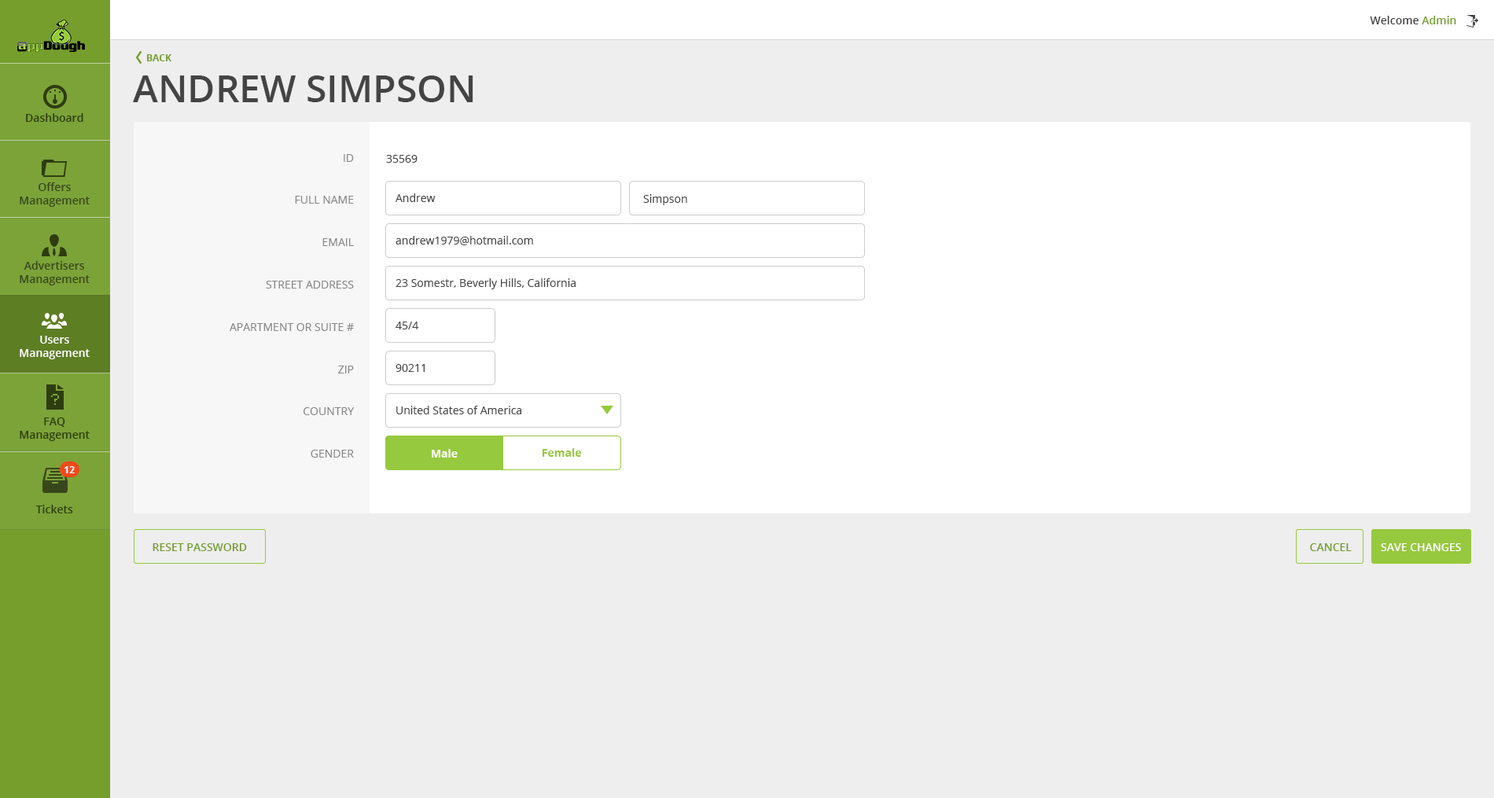
<style>
.page{position:relative;width:1494px;height:798px;background:#eeeeee}
.page>*{position:absolute;margin:0}
.t1{font:11px "OpenSans-Semibold";color:#444444}
.t2{font:11px "OpenSans-Semibold";color:#759e2d}
.t3{font:9.4px "OpenSans-Bold";color:#759e2d;text-transform:uppercase}
.t4{font:37.7px "OpenSans-Semibold";color:#444444;text-transform:uppercase}
.t5{font:11px "OpenSans-Semibold";color:#2d3d0f}
.t6{font:11px "OpenSans";color:#888888;text-transform:uppercase}
.t7{font:11px "OpenSans";color:#444444}
.t8{font:11px "OpenSans-Semibold";color:#fffffe}
.t9{font:11px "OpenSans-Bold";color:#ffffff}
.t10{font:11px "OpenSans-Bold";color:#96c93d}
.t11{font:9.4px "OpenSans-Bold";color:#ffffff}
.t12{font:11px "OpenSans-Semibold";color:#759e2d;text-transform:uppercase}
.t13{font:11px "OpenSans-Semibold";color:#ffffff;text-transform:uppercase}
</style>
<div class="page">
<p class="t1" style="left:1370px;top:16px;width:86px;height:8px">Welcome <span class="t2">Admin</span></p>
<p class="t3" style="left:147px;top:54px;width:24px;height:7px">Back</p>
<p class="t4" style="left:133px;top:75px;width:340px;height:27px">Andrew Simpson</p>
<p class="t5" style="left:26px;top:113px;width:57px;height:9px">Dashboard</p>
<p class="t6" style="left:230px;top:154px;width:125px;height:304px;text-align:right">ID<br>Full Name<br>Email<br>Street Address<br>Apartment or Suite #<br>Zip<br>Country<br>Gender</p>
<p class="t7" style="left:386px;top:155px;width:32px;height:8px">35569</p>
<p class="t5" style="left:20px;top:182px;width:70px;height:25px;text-align:center">Offers Management</p>
<p class="t7" style="left:396px;top:193px;width:40px;height:9px">Andrew</p>
<p class="t7" style="left:643px;top:194px;width:44px;height:11px">Simpson</p>
<p class="t7" style="left:396px;top:236px;width:137px;height:9px">andrew1979@hotmail.com</p>
<p class="t5" style="left:20px;top:261px;width:70px;height:24px;text-align:center">Advertisers Management</p>
<p class="t7" style="left:396px;top:278px;width:180px;height:11px">23 Somestr, Beverly Hills, California</p>
<p class="t7" style="left:396px;top:322px;width:23px;height:7px">45/4</p>
<p class="t8" style="left:20px;top:336px;width:70px;height:23px;text-align:center">Users Management</p>
<p class="t7" style="left:396px;top:364px;width:29px;height:8px">90211</p>
<p class="t7" style="left:396px;top:406px;width:125px;height:8px">United States of America</p>
<p class="t5" style="left:20px;top:418px;width:70px;height:23px;text-align:center">FAQ Management</p>
<p class="t9" style="left:432px;top:449px;width:26px;height:9px">Male</p>
<p class="t10" style="left:542px;top:448px;width:39px;height:9px">Female</p>
<p class="t11" style="left:64px;top:466px;width:11px;height:7px">12</p>
<p class="t5" style="left:35px;top:505px;width:38px;height:8px">Tickets</p>
<p class="t12" style="left:153px;top:543px;width:94px;height:8px">Reset Password</p>
<p class="t12" style="left:1310px;top:543px;width:42px;height:8px">Cancel</p>
<p class="t13" style="left:1381px;top:543px;width:80px;height:8px">Save Changes</p>
</div>
